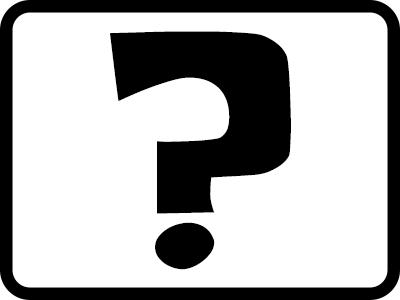
<style>
.page{position:relative;width:400px;height:300px;background:#ffffff}
.page>*{position:absolute;margin:0}
.t1{font:300px "Slackey-Regular";color:#000000}
</style>
<div class="page">
<p class="t1" style="left:110px;top:31px;width:181px;height:239px">?</p>
</div>
